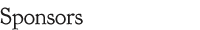
<style>
.page{position:relative;width:200px;height:30px;background:#ffffff}
.page>*{position:absolute;margin:0}
.t1{font:24px "GoudyBookletter1911";color:#1d1b1b}
</style>
<div class="page">
<p class="t1" style="left:0px;top:7px;width:83px;height:23px">Sponsors</p>
</div>
